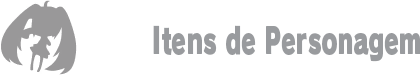
<style>
.page{position:relative;width:420px;height:76px;background:#ffffff}
.page>*{position:absolute;margin:0}
.t1{font:36px "RodinPro-UB";color:#999b9e;scale:0.65 1}
</style>
<div class="page">
<p class="t1" style="left:153px;top:25px;width:268px;height:37px">Itens de Personagem</p>
</div>
